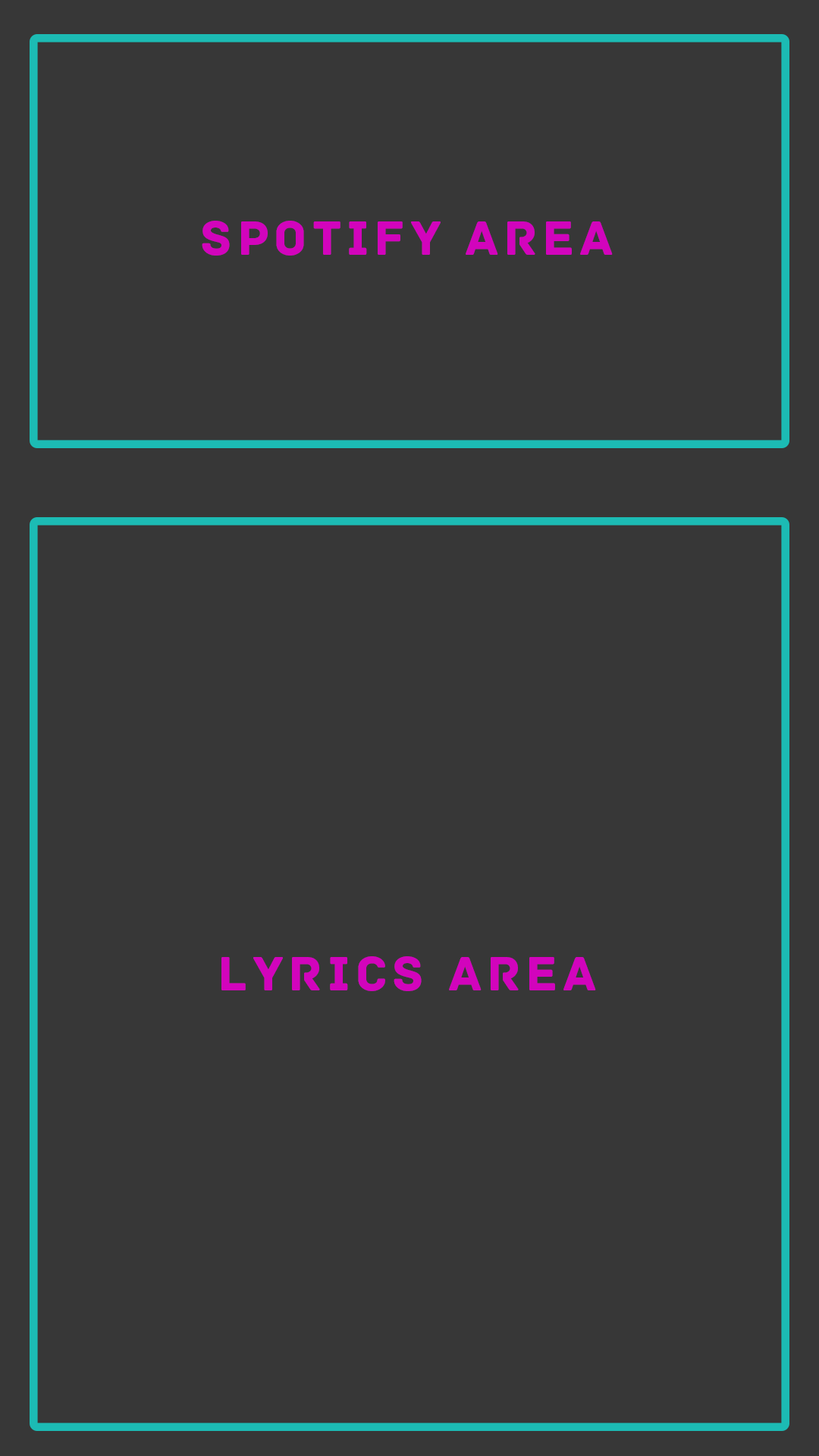
<style>
.page{position:relative;width:819px;height:1456px;background:#373737}
.page>*{position:absolute;margin:0}
.t1{font:51px "Archive";letter-spacing:0.1em;color:#d204bc}
</style>
<div class="page">
<p class="t1" style="left:202px;top:221px;width:411px;height:35px">Spotify Area</p>
<p class="t1" style="left:221px;top:956px;width:375px;height:35px">Lyrics Area</p>
</div>
